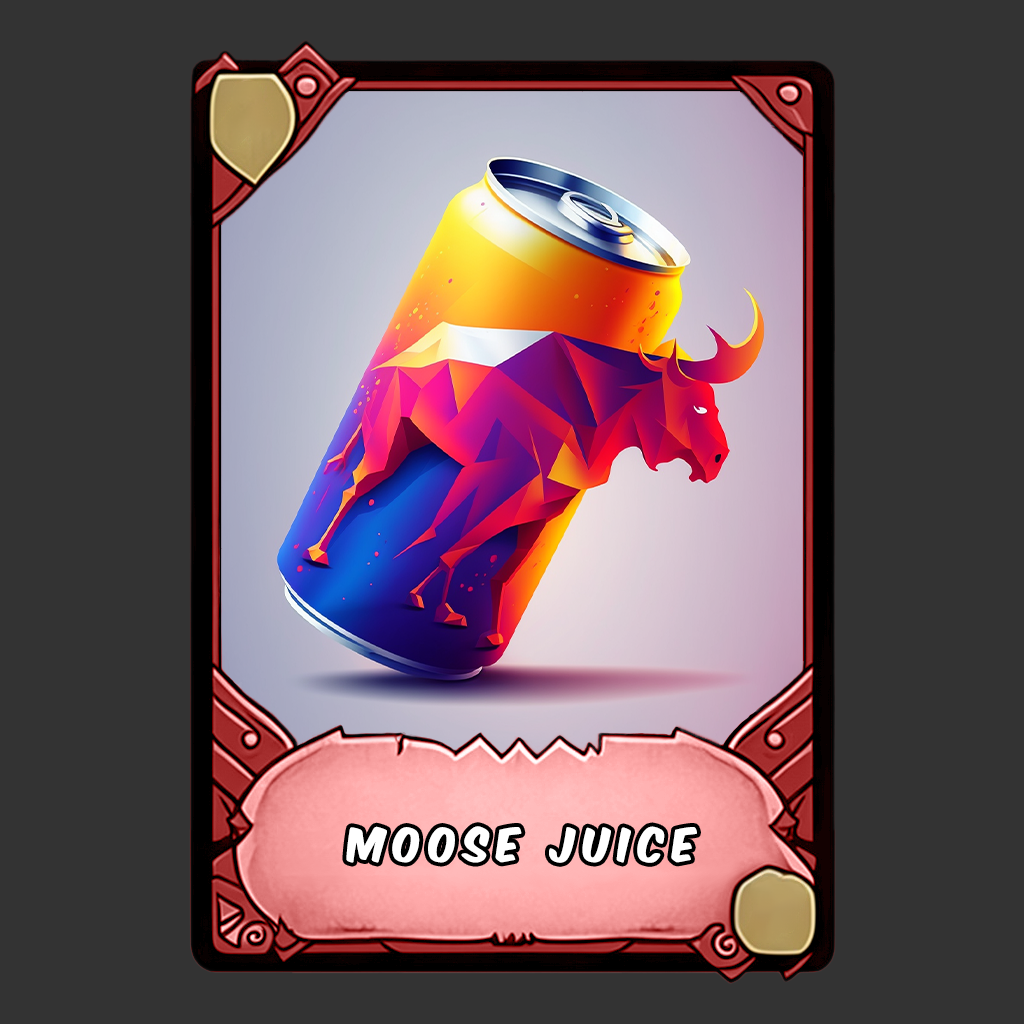
<style>
.page{position:relative;width:1024px;height:1024px;background:#333333}
.page>*{position:absolute;margin:0}
.t1{font:40px "KomikaAxis";letter-spacing:0.2em;color:#ffffff}
</style>
<div class="page">
<p class="t1" style="left:346px;top:826px;width:351px;height:37px">MOOSE JUICE</p>
</div>
